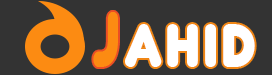
<style>
.page{position:relative;width:272px;height:75px;background:#333333}
.page>*{position:absolute;margin:0}
.t1{font:78.8px "Junegull-Regular";letter-spacing:0.05em;color:#fc8b12;scale:0.67 1}
.t2{font:59.7px "Junegull-Regular";letter-spacing:0.05em;color:#ffffff;scale:0.94 1}
</style>
<div class="page">
<p class="t1" style="left:93px;top:12px;width:25px;height:55px">j</p>
<p class="t2" style="left:125px;top:24px;width:130px;height:43px">ahid</p>
</div>
